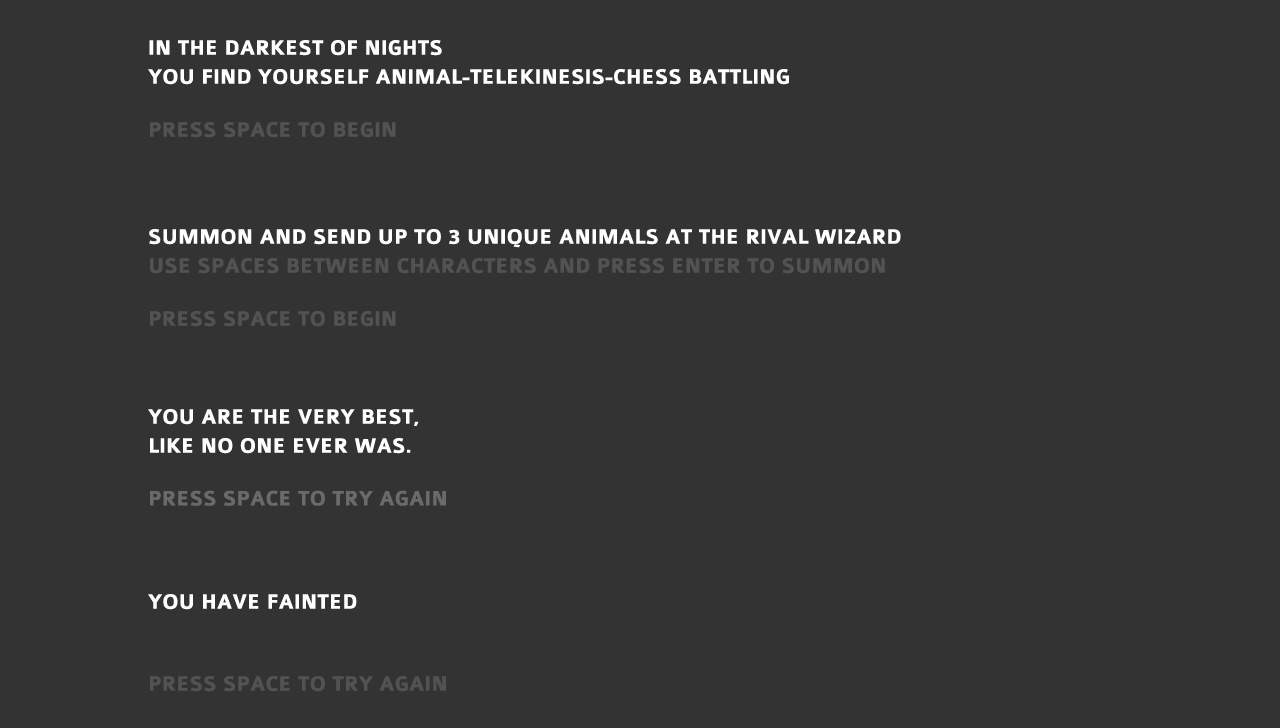
<style>
.page{position:relative;width:1280px;height:728px;background:#333333}
.page>*{position:absolute;margin:0}
.t1{font:21.9px "Colaborate-Bold";color:#ffffff;text-transform:uppercase}
.t2{font:21.9px "Colaborate-Bold";color:#525252;text-transform:uppercase}
.t3{font:21.9px "Colaborate-Bold";color:#6a6a6a;text-transform:uppercase}
</style>
<div class="page">
<p class="t1" style="left:149px;top:40px;width:293px;height:16px">In the darkest of nights</p>
<p class="t1" style="left:148px;top:69px;width:641px;height:16px">You find yourself animal-telekinesis-chess battling</p>
<p class="t2" style="left:150px;top:122px;width:246px;height:16px">Press space to BEGIN</p>
<p class="t1" style="left:149px;top:229px;width:752px;height:19px">Summon and send up to 3 unique animals at the rival wizard</p>
<p class="t2" style="left:150px;top:258px;width:735px;height:16px">use spaces between characters and press enter to summon</p>
<p class="t2" style="left:150px;top:311px;width:246px;height:16px">Press space to BEGIN</p>
<p class="t1" style="left:148px;top:409px;width:271px;height:17px">You are the very best,</p>
<p class="t3" style="left:150px;top:438px;width:296px;height:68px"><span class="t1">like no one ever was.<br></span><br>press space to try again</p>
<p class="t1" style="left:148px;top:594px;width:209px;height:16px">you have fainted</p>
<p class="t2" style="left:150px;top:676px;width:296px;height:16px">Press space to try again</p>
</div>
